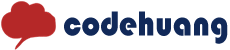
<style>
.page{position:relative;width:230px;height:50px;background:#ffffff}
.page>*{position:absolute;margin:0}
.t1{font:36px "Bauhaus93";color:#112959;scale:0.92 1}
</style>
<div class="page">
<p class="t1" style="left:64px;top:11px;width:164px;height:33px">codehuang</p>
</div>
